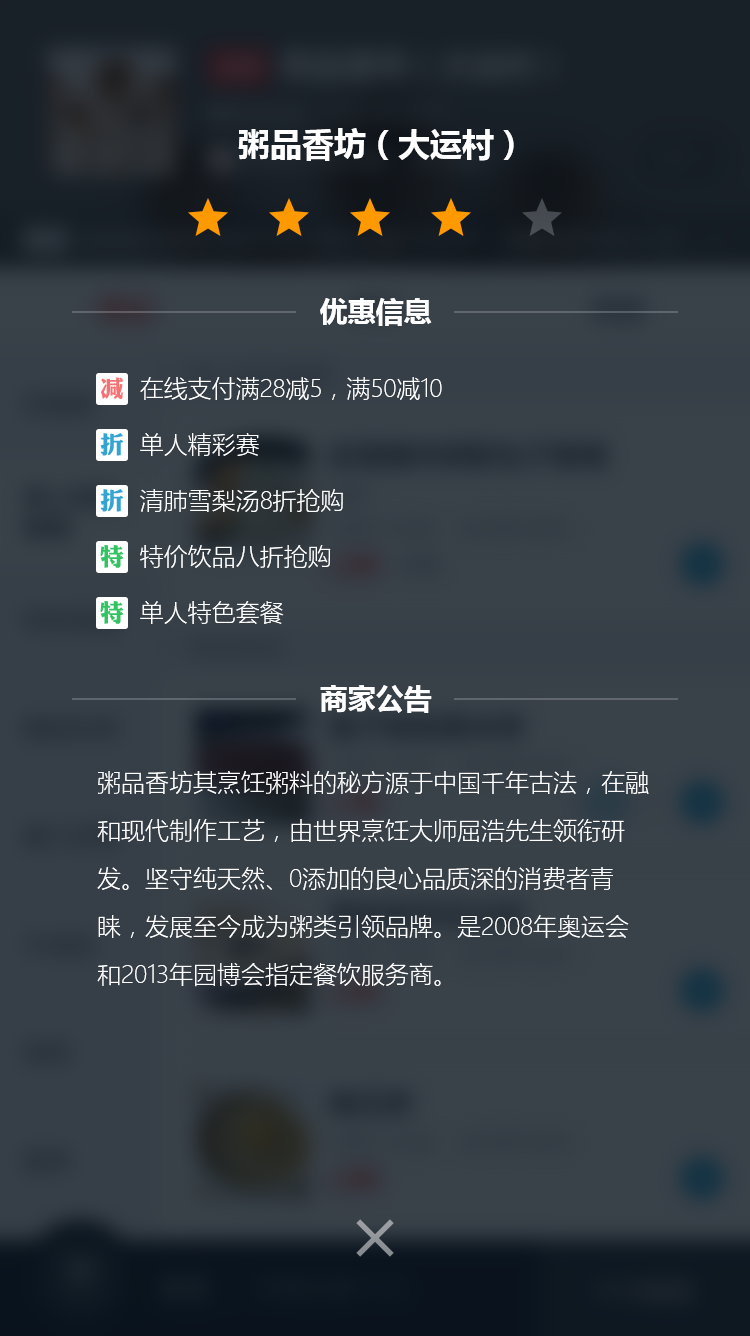
<style>
.page{position:relative;width:750px;height:1336px}
.page>*{position:absolute;margin:0}
.t1{font:32px "MicrosoftYaHei-Bold";color:#ffffff}
.t2{font:28px "MicrosoftYaHei-Bold";color:#ffffff}
.t3{font:24px "MicrosoftYaHeiLight";color:#ffffff}
.t4{font:24px/48px "MicrosoftYaHeiLight";color:#ffffff}
</style>
<div class="page">
<p class="t1" style="left:238px;top:128px;width:276px;height:33px">粥品香坊（大运村）</p>
<p class="t2" style="left:320px;top:298px;width:112px;height:28px">优惠信息</p>
<p class="t3" style="left:140px;top:377px;width:302px;height:23px">在线支付满28减5，满50减10</p>
<p class="t3" style="left:140px;top:433px;width:119px;height:23px">单人精彩赛</p>
<p class="t3" style="left:140px;top:489px;width:203px;height:23px">清肺雪梨汤8折抢购</p>
<p class="t3" style="left:140px;top:545px;width:191px;height:23px">特价饮品八折抢购</p>
<p class="t3" style="left:140px;top:601px;width:144px;height:23px">单人特色套餐</p>
<p class="t2" style="left:320px;top:685px;width:112px;height:28px">商家公告</p>
<p class="t4" style="left:97px;top:771px;width:552px;height:216px">粥品香坊其烹饪粥料的秘方源于中国千年古法，在融和现代制作工艺，由世界烹饪大师屈浩先生领衔研发。坚守纯天然、0添加的良心品质深的消费者青睐，发展至今成为粥类引领品牌。是2008年奥运会和2013年园博会指定餐饮服务商。</p>
</div>
